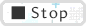
<style>
.page{position:relative;width:86px;height:26px;background:#ffffff}
.page>*{position:absolute;margin:0}
.t1{font:16px "Amira-Roman";letter-spacing:0.1em;color:#333333}
</style>
<div class="page">
<p class="t1" style="left:31px;top:6px;width:37px;height:16px">Stop</p>
</div>
